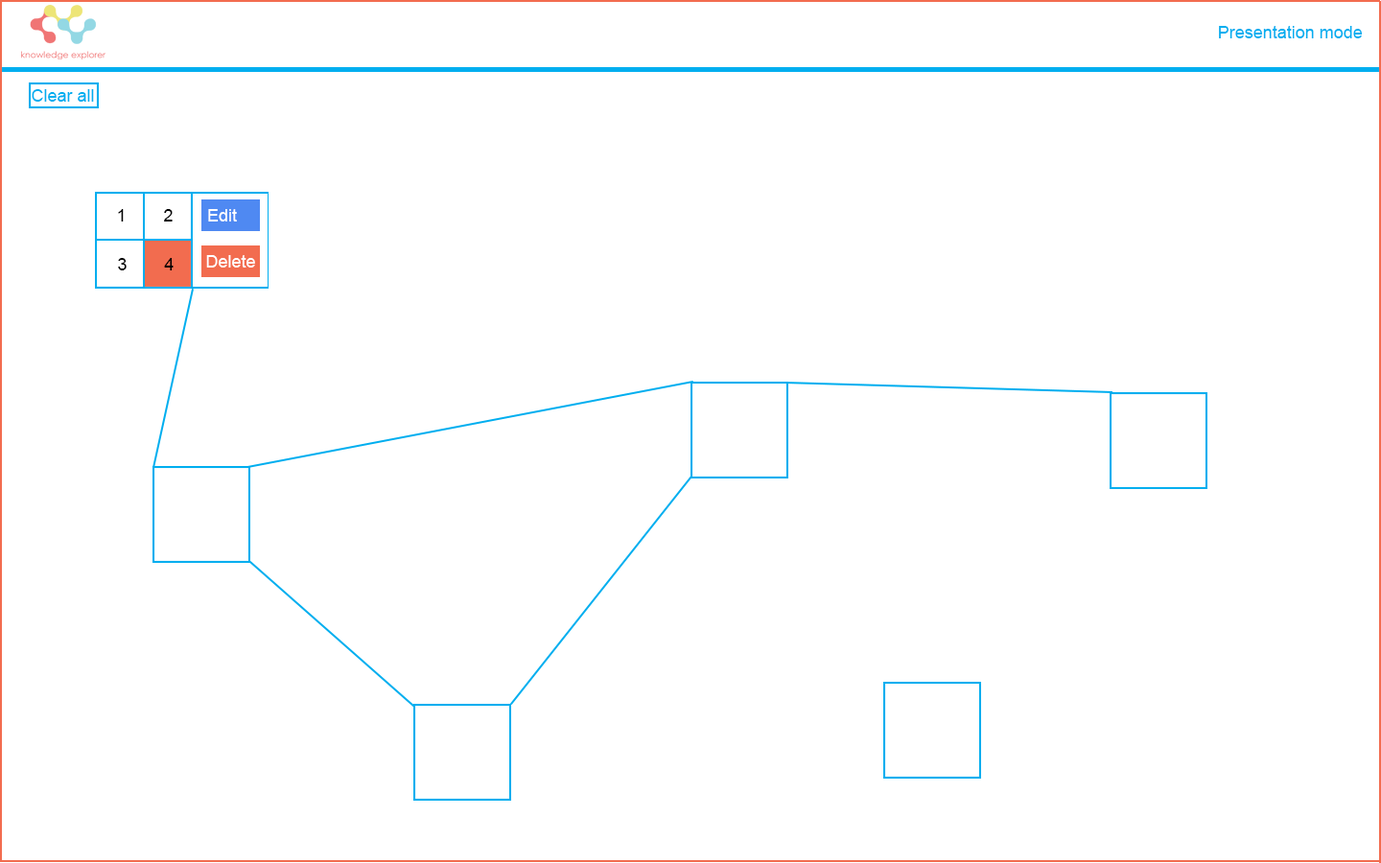
<style>
.page{position:relative;width:1381px;height:863px;background:#ffffff}
.page>*{position:absolute;margin:0}
.t1{font:17.3px "ArialMT";color:#00aeef}
.t2{font:17.3px "ArialMT";color:#000000}
.t3{font:17.3px "ArialMT";color:#ffffff}
</style>
<div class="page">
<p class="t1" style="left:1219px;top:26px;width:144px;height:12px">Presentation mode</p>
<p class="t1" style="left:32px;top:89px;width:62px;height:13px">Clear all</p>
<p class="t2" style="left:118px;top:209px;width:6px;height:13px">1</p>
<p class="t2" style="left:164px;top:209px;width:9px;height:13px">2</p>
<p class="t3" style="left:208px;top:209px;width:29px;height:13px">Edit</p>
<p class="t3" style="left:206px;top:255px;width:49px;height:13px">Delete</p>
<p class="t2" style="left:118px;top:258px;width:9px;height:12px">3</p>
<p class="t2" style="left:164px;top:258px;width:10px;height:12px">4</p>
</div>
